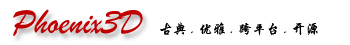
<style>
.page{position:relative;width:350px;height:45px;background:#ffffff}
.page>*{position:absolute;margin:0}
.t1{font:36px "STXingkai";color:#c00000}
.t2{font:14px "STXingkai";color:#000000}
</style>
<div class="page">
<p class="t1" style="left:13px;top:9px;width:130px;height:27px">Phoenix3D</p>
<p class="t2" style="left:160px;top:22px;width:158px;height:14px">古典 . 优雅 . 跨平台 . 开源</p>
</div>
